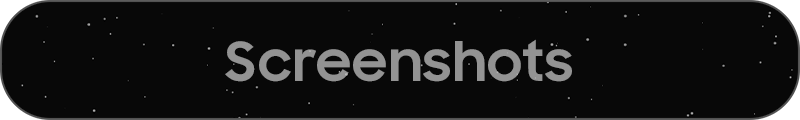
<style>
.page{position:relative;width:800px;height:120px;background:#080808}
.page>*{position:absolute;margin:0}
.t1{font:53.9px "SamsungSharpSans-Bold";letter-spacing:0.025em;color:#939393}
</style>
<div class="page">
<p class="t1" style="left:225px;top:39px;width:347px;height:43px">Screenshots</p>
</div>
